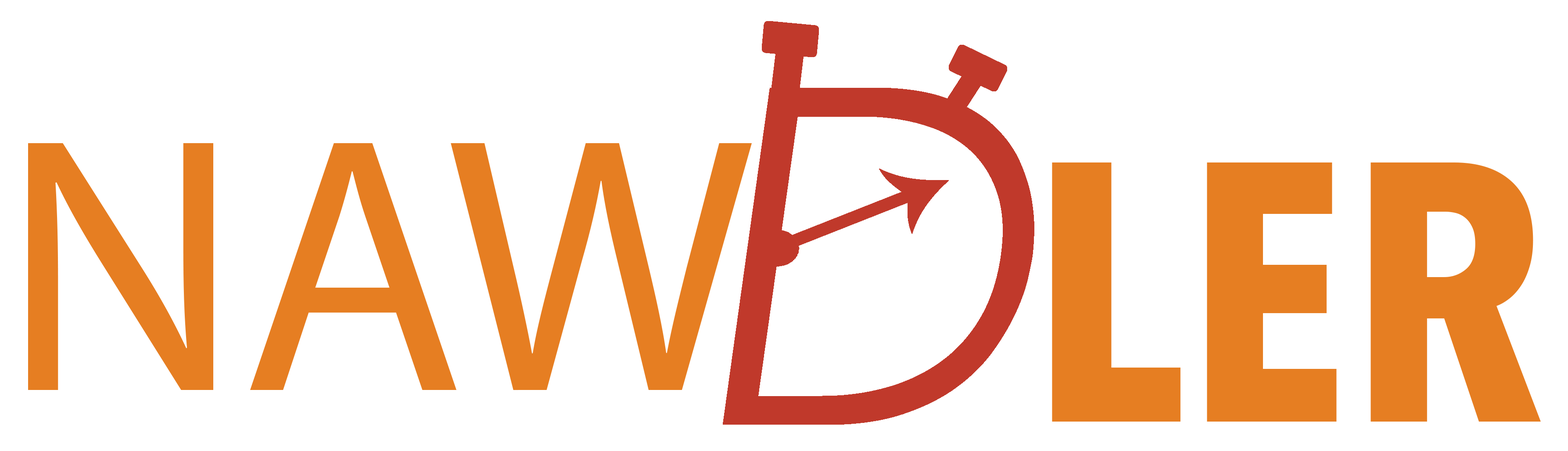
<style>
.page{position:relative;width:1568px;height:451px;background:#ffffff}
.page>*{position:absolute;margin:0}
.t1{font:365.7px "MyriadPro-Regular";color:#e67e22}
.t2{font:365.7px "AvenirNextCondensed-Bold";color:#e67e22}
</style>
<div class="page">
<p class="t1" style="left:28px;top:143px;width:724px;height:247px">NAW</p>
<p class="t2" style="left:1052px;top:162px;width:489px;height:259px">LER</p>
</div>
